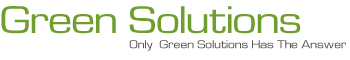
<style>
.page{position:relative;width:350px;height:60px;background:#ffffff}
.page>*{position:absolute;margin:0}
.t1{font:40px "WaukeganLDOExtended";color:#6f9e2e}
.t2{font:12px "WaukeganLDOExtended";color:#555555}
</style>
<div class="page">
<p class="t1" style="left:1px;top:6px;width:300px;height:28px">Green Solutions</p>
<p class="t2" style="left:129px;top:40px;width:217px;height:11px">Only  Green Solutions Has The Answer</p>
</div>
